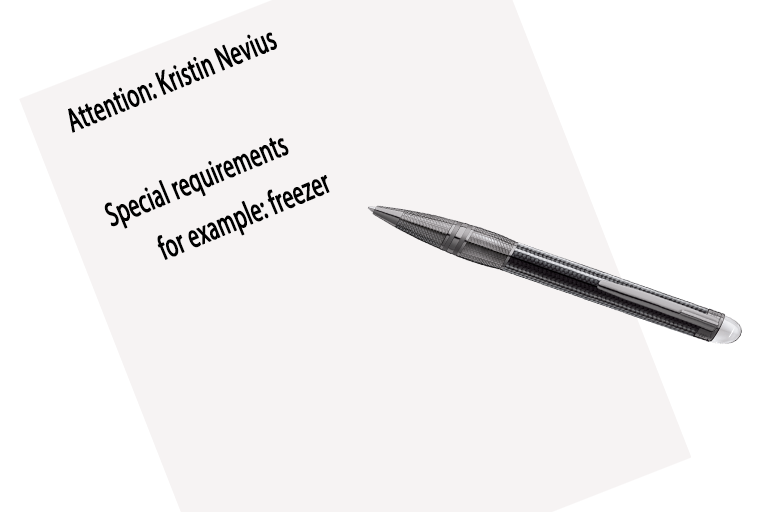
<style>
.page{position:relative;width:768px;height:512px;background:#f6f3f3}
.page>*{position:absolute;margin:0}
.t1{font:57.6px/51px "MyriadPro-Regular";color:#000000;font-weight:bold;scale:0.62 1}
</style>
<div class="page">
<p class="t1" style="left:68px;top:32px;width:262px;height:228px;rotate:-22deg">Attention: Kristin Nevius<br><br>Special requirements<br> for example: freezer</p>
</div>
